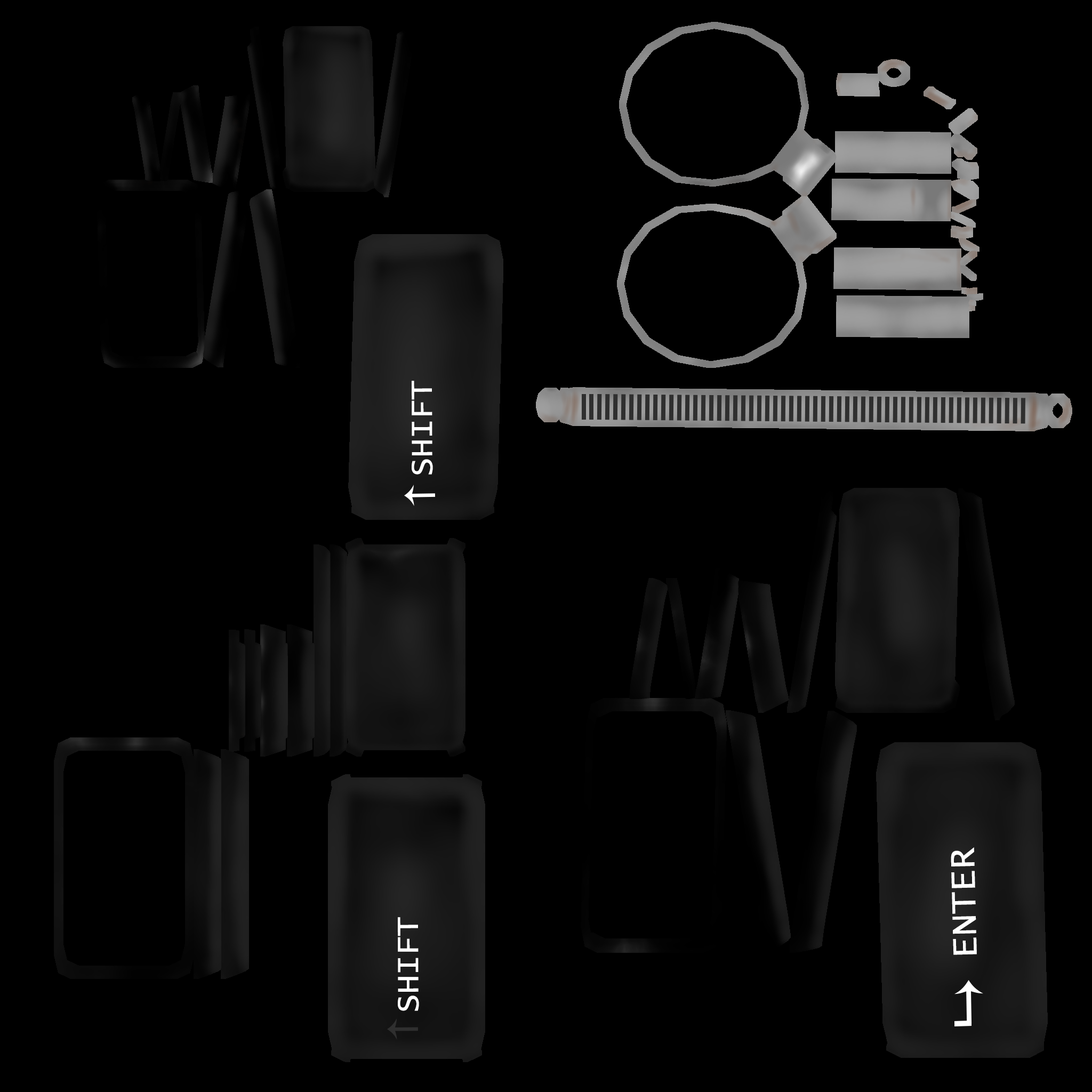
<style>
.page{position:relative;width:1092px;height:1092px;background:#000000}
.page>*{position:absolute;margin:0}
.t1{font:32px "LucidaConsole";color:#ffffff}
.t2{font:12.8px "LucidaConsole";color:#491e1e}
.t3{font:36.9px "LucidaConsole";color:#ffffff}
</style>
<div class="page">
<p class="t1" style="left:412px;top:381px;width:21px;height:94px;rotate:-90deg"><span class="t2"> </span>SHIFT</p>
<p class="t3" style="left:951px;top:847px;width:26px;height:108px;rotate:-91deg">ENTER</p>
<p class="t1" style="left:398px;top:917px;width:21px;height:94px;rotate:-90deg"><span class="t2"> </span>SHIFT</p>
</div>
